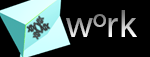
<style>
.page{position:relative;width:150px;height:57px;background:#000000}
.page>*{position:absolute;margin:0}
.t1{font:38px "MyriadPro-Regular"}
</style>
<div class="page">
<p class="t1" style="left:66px;top:10px;width:71px;height:27px">work</p>
</div>
